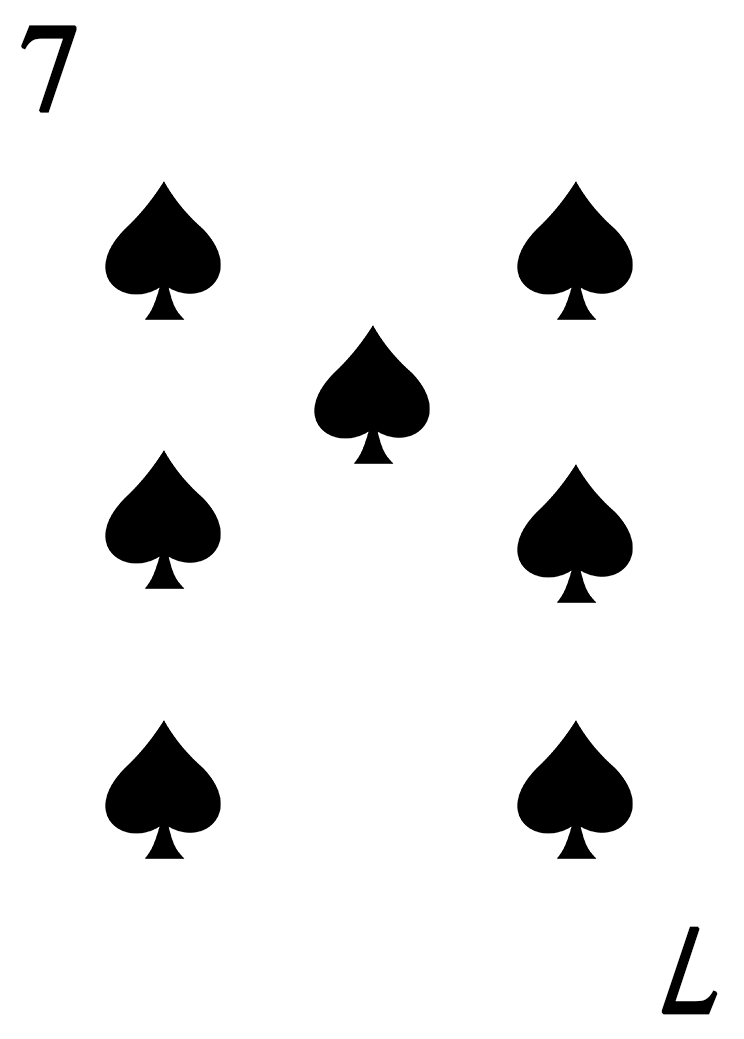
<style>
.page{position:relative;width:744px;height:1039px;background:#ffffff}
.page>*{position:absolute;margin:0}
.t1{font:125px "TimesNewRomanPSMT";color:#000000;font-weight:bold}
</style>
<div class="page">
<p class="t1" style="left:21px;top:25px;width:56px;height:88px">7</p>
<p class="t1" style="left:661px;top:926px;width:57px;height:89px;rotate:180deg">7</p>
</div>
